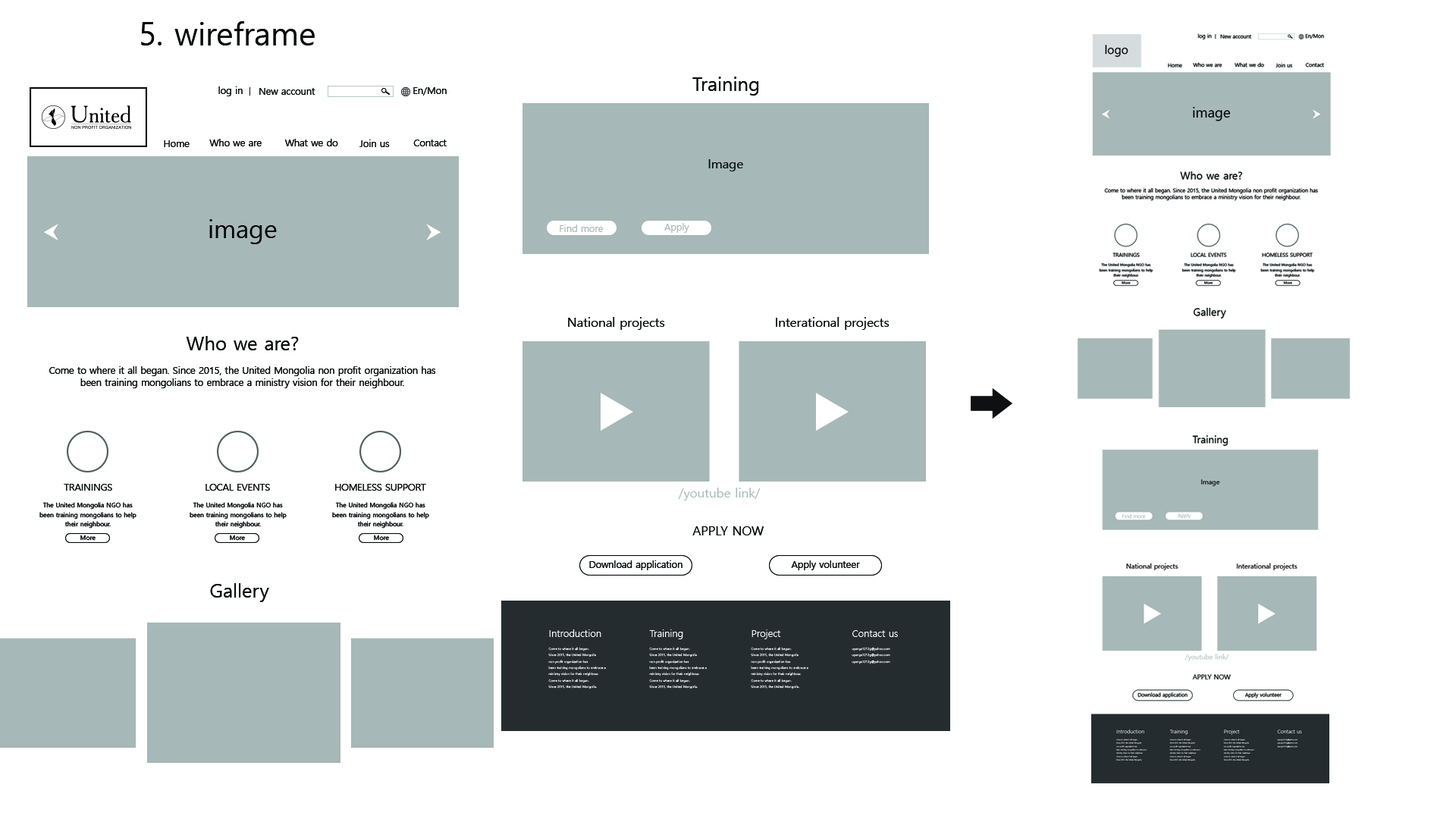
<style>
.page{position:relative;width:1456px;height:819px;background:#ffffff}
.page>*{position:absolute;margin:0}
.t1{font:31.6px "MalgunGothic";color:#060808}
.t2{font:19px "MalgunGothic";color:#060808}
.t3{font:9.5px "MalgunGothic";color:#060808}
.t4{font:12.6px "MalgunGothic";color:#060808}
.t5{font:25.3px "MalgunGothic";color:#060808}
.t6{font:9.5px "MalgunGothic";color:#a6b8b7}
.t7{font:9.5px/12.6px "MalgunGothic";color:#060808}
.t8{font:9.5px "MalgunGothic";color:#060808;text-transform:uppercase}
.t9{font:12.6px "MalgunGothic";color:#a6b8b7}
.t10{font:6.3px/9.5px "MalgunGothic";color:#060808}
.t11{font:12.6px "MalgunGothic";color:#060808;text-transform:uppercase}
.t12{font:6.3px "MalgunGothic";color:#060808}
.t13{font:3.2px/6.3px "MalgunGothic";color:#ffffff}
.t14{font:9.5px/56.9px "MalgunGothic";color:#ffffff}
.t15{font:3.2px/12.6px "MalgunGothic";color:#ffffff}
</style>
<div class="page">
<p class="t1" style="left:141px;top:21px;width:174px;height:24px">5. wireframe</p>
<p class="t2" style="left:692px;top:77px;width:67px;height:19px">Training</p>
<p class="t3" style="left:218px;top:86px;width:25px;height:10px">log in</p>
<p class="t3" style="left:259px;top:88px;width:56px;height:7px">New account</p>
<p class="t3" style="left:413px;top:87px;width:34px;height:9px">En/Mon</p>
<p class="t3" style="left:164px;top:140px;width:26px;height:7px">Home</p>
<p class="t3" style="left:209px;top:139px;width:53px;height:7px">Who we are</p>
<p class="t3" style="left:284px;top:139px;width:54px;height:7px">What we do</p>
<p class="t3" style="left:359px;top:140px;width:31px;height:7px">Join us</p>
<p class="t3" style="left:413px;top:140px;width:34px;height:6px">Contact</p>
<p class="t4" style="left:708px;top:159px;width:35px;height:12px">Image</p>
<p class="t5" style="left:209px;top:219px;width:68px;height:25px">image</p>
<p class="t6" style="left:560px;top:224px;width:43px;height:8px">Find more</p>
<p class="t6" style="left:664px;top:223px;width:25px;height:10px">Apply</p>
<p class="t4" style="left:568px;top:317px;width:97px;height:13px">National projects</p>
<p class="t4" style="left:776px;top:317px;width:114px;height:13px">Interational projects</p>
<p class="t2" style="left:186px;top:336px;width:113px;height:14px">Who we are?</p>
<p class="t7" style="left:49px;top:366px;width:387px;height:22px;text-align:center">Come to where it all began. Since 2015, the United Mongolia non profit organization has<br>been training mongolians to embrace a ministry vision for their neighbour.</p>
<p class="t8" style="left:64px;top:484px;width:48px;height:7px">Trainings</p>
<p class="t8" style="left:206px;top:484px;width:64px;height:7px">local events</p>
<p class="t8" style="left:335px;top:484px;width:91px;height:7px">homeless support</p>
<p class="t9" style="left:678px;top:488px;width:83px;height:12px">/youtube link/</p>
<p class="t10" style="left:39px;top:502px;width:97px;height:27px;text-align:center">The United Mongolia NGO has<br>been training mongolians to help<br>their neighbour.</p>
<p class="t10" style="left:190px;top:502px;width:97px;height:27px;text-align:center">The United Mongolia NGO has<br>been training mongolians to help<br>their neighbour.</p>
<p class="t10" style="left:332px;top:502px;width:97px;height:27px;text-align:center">The United Mongolia NGO has<br>been training mongolians to help<br>their neighbour.</p>
<p class="t11" style="left:692px;top:526px;width:72px;height:9px">Apply now</p>
<p class="t12" style="left:80px;top:535px;width:16px;height:6px">More</p>
<p class="t12" style="left:230px;top:535px;width:15px;height:6px">More</p>
<p class="t12" style="left:374px;top:535px;width:15px;height:6px">More</p>
<p class="t3" style="left:589px;top:560px;width:93px;height:10px"><span class="t8">D</span>ownload application</p>
<p class="t3" style="left:791px;top:560px;width:69px;height:10px">Apply volunteer</p>
<p class="t2" style="left:210px;top:583px;width:59px;height:19px">Gallery</p>
<p class="t13" style="left:548px;top:629px;width:58px;height:60px"><span class="t14">Introduction<br></span><span class="t15">Come to where it all began.<br></span>Since 2015, the United Mongolia<br>non profit organization has<br>been training mongolians to embrace a<br>ministry vision for their neighbour.<br>Come to where it all began.<br>Since 2015, the United Mongolia.</p>
<p class="t13" style="left:649px;top:629px;width:58px;height:60px"><span class="t14">Training<br></span><span class="t15">Come to where it all began.<br></span>Since 2015, the United Mongolia<br>non profit organization has<br>been training mongolians to embrace a<br>ministry vision for their neighbour.<br>Come to where it all began.<br>Since 2015, the United Mongolia.</p>
<p class="t13" style="left:751px;top:629px;width:57px;height:60px"><span class="t14">Project<br></span><span class="t15">Come to where it all began.<br></span>Since 2015, the United Mongolia<br>non profit organization has<br>been training mongolians to embrace a<br>ministry vision for their neighbour.<br>Come to where it all began.<br>Since 2015, the United Mongolia.</p>
<p class="t13" style="left:852px;top:630px;width:46px;height:34px"><span class="t14">Contact us<br></span><span class="t15">uyanga1212g@yahoo.com<br></span>uyanga1212g@yahoo.com<br>uyanga1212g@yahoo.com</p>
</div>
